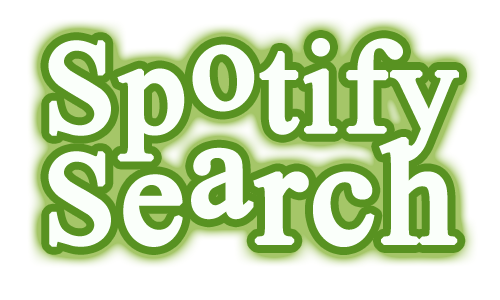
<style>
.page{position:relative;width:500px;height:300px;background:#ffffff}
.page>*{position:absolute;margin:0}
.t1{font:194px/111px "MicrosoftHimalaya";color:#fafffa;font-weight:bold}
.t2{font:210px/111px "MicrosoftHimalaya";color:#fafffa;font-weight:bold}
.t3{font:208px/111px "MicrosoftHimalaya";color:#fafffa;font-weight:bold}
.t4{font:219px/111px "MicrosoftHimalaya";color:#fafffa;font-weight:bold}
</style>
<div class="page">
<p class="t1" style="left:48px;top:38px;width:411px;height:209px">Spotify<br>S<span class="t2">e</span><span class="t3">a</span><span class="t4">rch</span></p>
</div>
